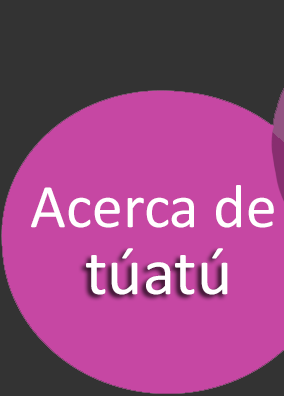
<style>
.page{position:relative;width:284px;height:396px;background:#c647a3}
.page>*{position:absolute;margin:0}
.t1{font:62px "Calibri";color:#ffffff}
.t2{font:67px "Calibri";color:#ffffff}
</style>
<div class="page">
<p class="t1" style="left:31px;top:185px;width:243px;height:43px">Acerca de</p>
<p class="t2" style="left:86px;top:248px;width:142px;height:47px">túatú</p>
</div>
